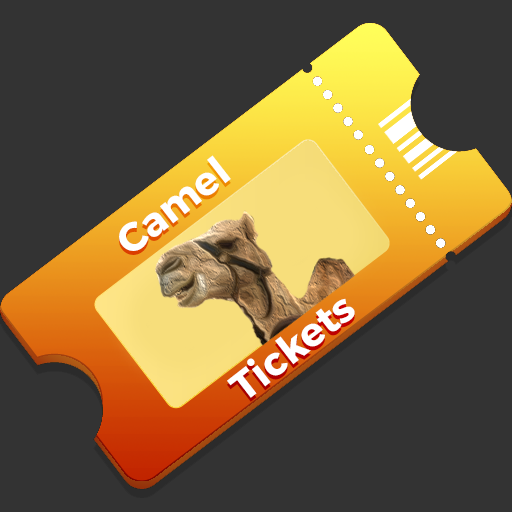
<style>
.page{position:relative;width:512px;height:512px;background:#333333}
.page>*{position:absolute;margin:0}
.t1{font:40px "Montserrat-Bold";color:#ffffff}
</style>
<div class="page">
<p class="t1" style="left:119px;top:155px;width:236px;height:243px;rotate:-38deg">Camel<br><br><br><br>Tickets</p>
</div>
